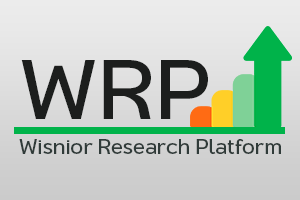
<style>
.page{position:relative;width:300px;height:200px}
.page>*{position:absolute;margin:0}
.t1{font:89.4px "PSUStidti-Regular";color:#1c1e1d}
.t2{font:21.6px "PSUStidti-Regular";color:#303b39}
</style>
<div class="page">
<p class="t1" style="left:21px;top:60px;width:187px;height:59px">WRP</p>
<p class="t2" style="left:19px;top:139px;width:262px;height:15px">Wisnior Research Platform</p>
</div>
